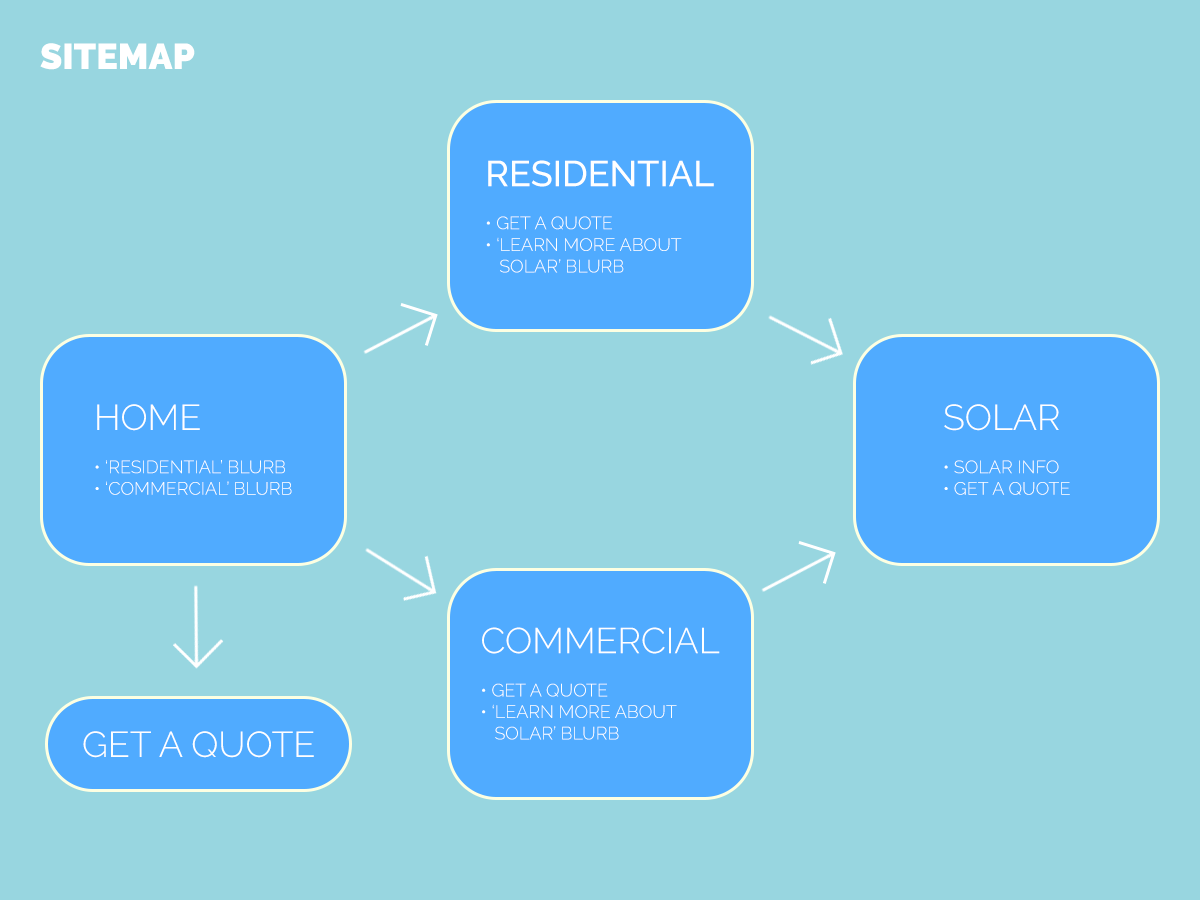
<style>
.page{position:relative;width:1200px;height:900px;background:#98d6e0}
.page>*{position:absolute;margin:0}
.t1{font:36px "Raleway-Black";color:#ffffff}
.t2{font:18px "Raleway-Light";color:#ffffff}
.t3{font:36px "Raleway-Medium";color:#ffffff}
.t4{font:36px "Raleway-Light";color:#ffffff}
</style>
<div class="page">
<p class="t1" style="left:40px;top:43px;width:155px;height:27px">SITEMAP</p>
<p class="t2" style="left:486px;top:160px;width:228px;height:113px"><span class="t3">RESIDENTIAL<br><br></span>• GET A QUOTE<br>• ‘LEARN MORE ABOUT<br>   SOLAR’ BLURB</p>
<p class="t2" style="left:95px;top:404px;width:197px;height:91px"><span class="t4">HOME<br></span><br>• ‘RESIDENTIAL’ BLURB<br>• ‘COMMERCIAL’ BLURB</p>
<p class="t2" style="left:944px;top:404px;width:126px;height:91px"><span class="t4">SOLAR<br></span><br>• SOLAR INFO<br>• GET A QUOTE</p>
<p class="t2" style="left:482px;top:627px;width:238px;height:113px"><span class="t4">COMMERCIAL<br></span><br>• GET A QUOTE<br>• ‘LEARN MORE ABOUT<br>   SOLAR’ BLURB</p>
<p class="t4" style="left:83px;top:731px;width:231px;height:27px">GET A QUOTE</p>
</div>
